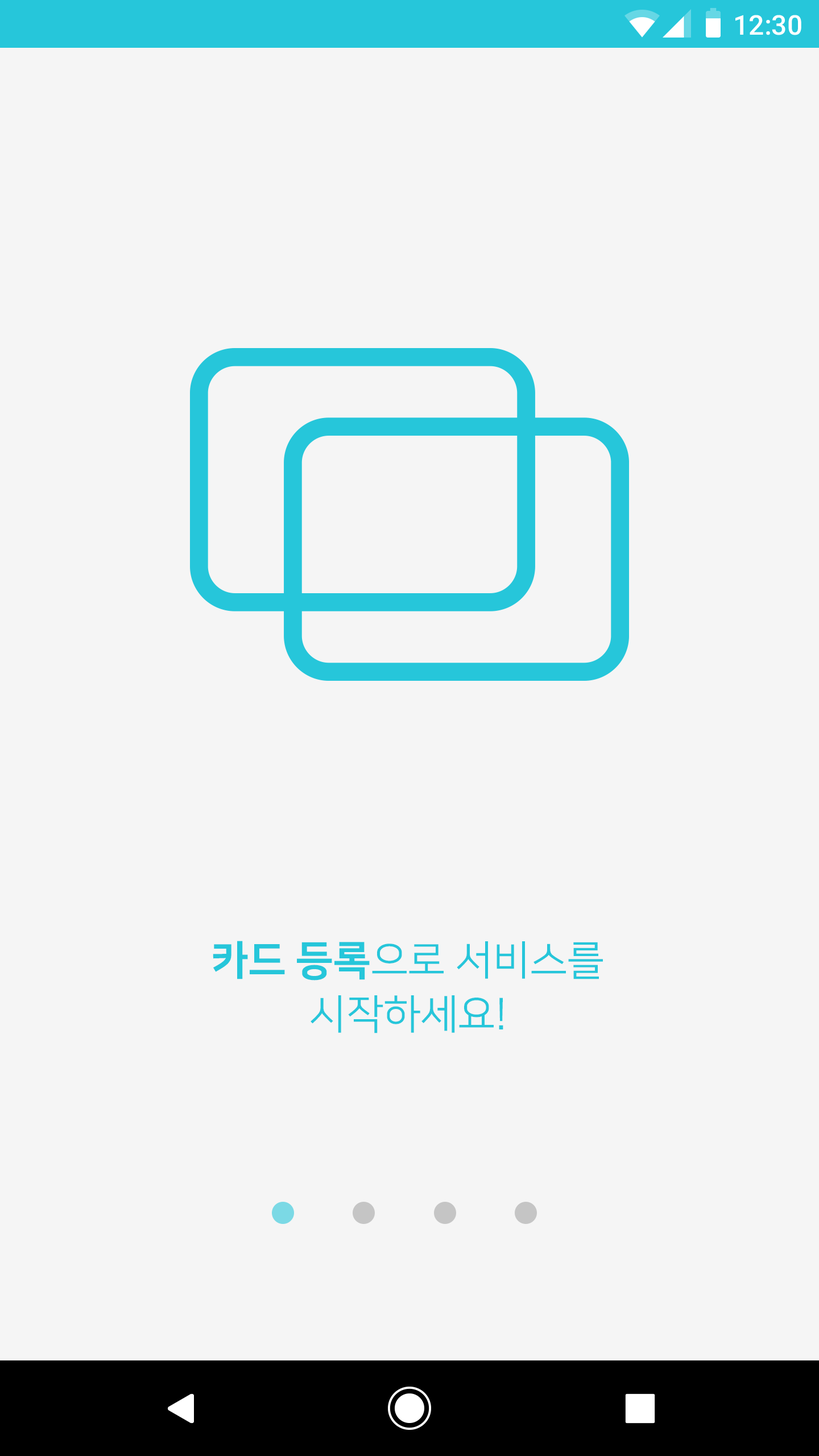
<style>
.page{position:relative;width:819px;height:1456px;background:#f5f5f5}
.page>*{position:absolute;margin:0}
.t1{font:27.3px "Roboto-Medium";color:#ffffff}
.t2{font:40.9px/54px "NanumSquareR";color:#26c6da}
.t3{font:40.9px/54px "NanumSquareEB";color:#26c6da}
</style>
<div class="page">
<p class="t1" style="left:735px;top:15px;width:66px;height:20px">12:30</p>
<p class="t2" style="left:213px;top:941px;width:390px;height:92px;text-align:center"><span class="t3">카드 등록</span>으로 서비스를<br>시작하세요!</p>
</div>
